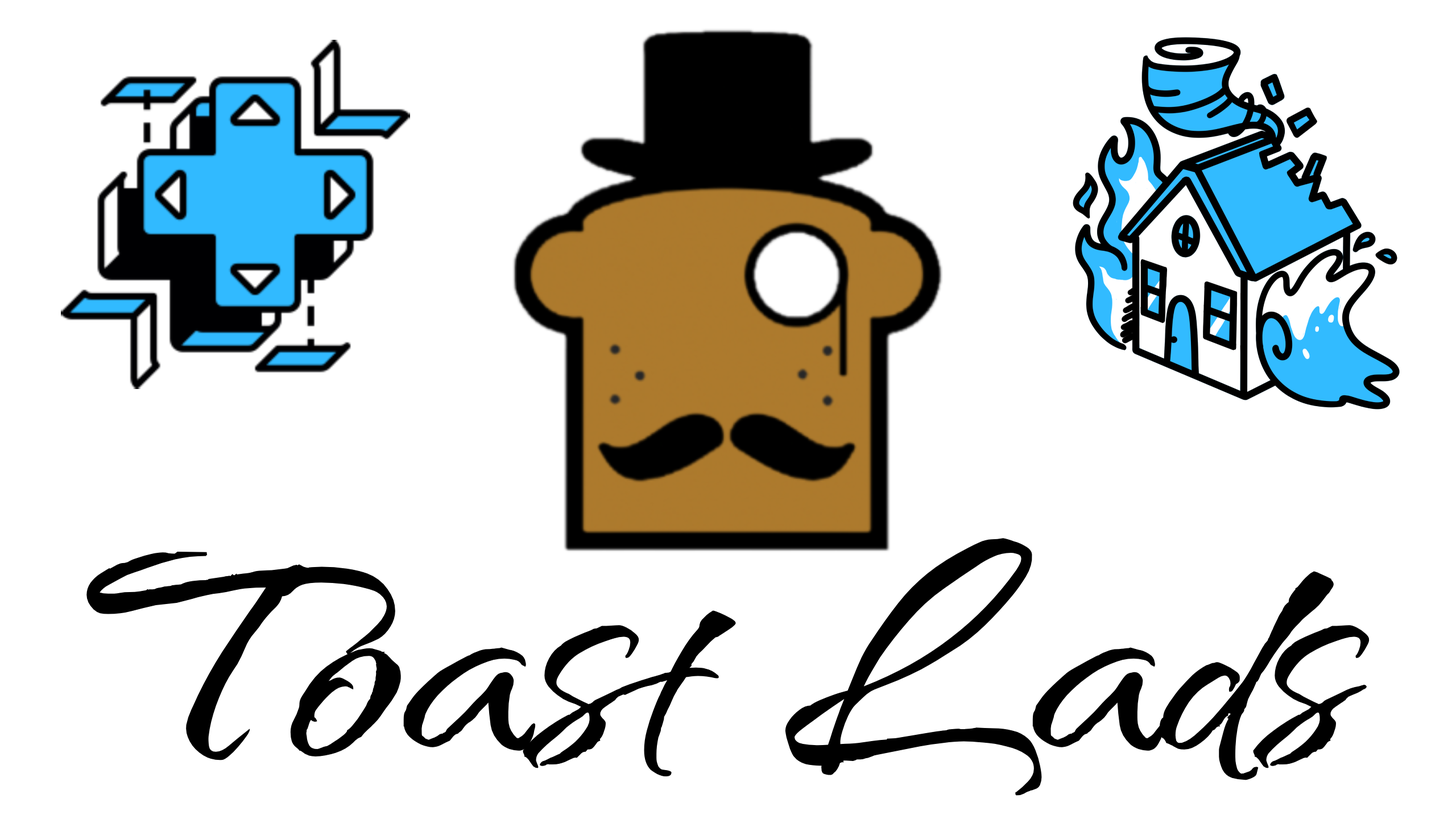
<style>
.page{position:relative;width:1456px;height:819px;background:#ffffff}
.page>*{position:absolute;margin:0}
.t1{font:384.8px "QwitcherGrypen-Bold";color:#000000}
</style>
<div class="page">
<p class="t1" style="left:86px;top:538px;width:1284px;height:258px">Toast Lads</p>
</div>
